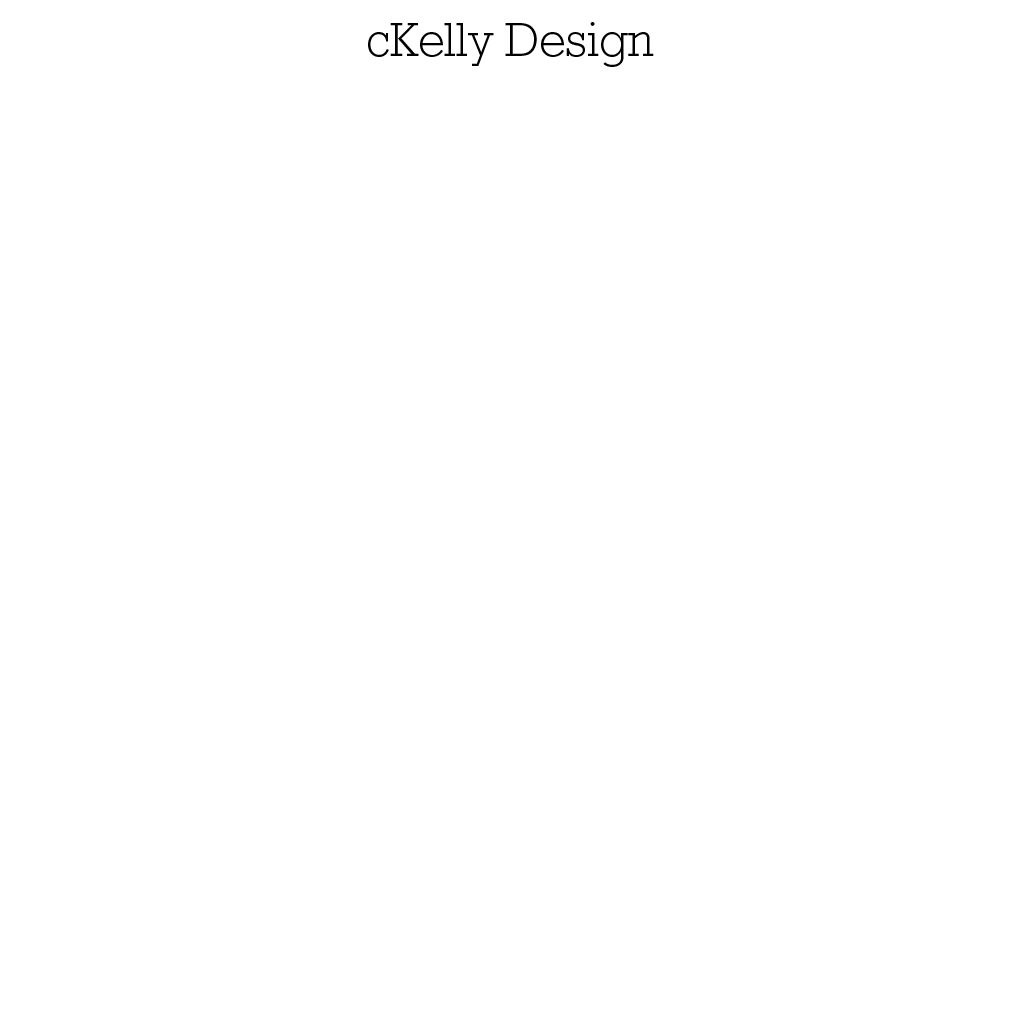
<style>
.page{position:relative;width:1020px;height:1020px;background:#ffffff}
.page>*{position:absolute;margin:0}
.t1{font:48px "RockwellStd-Light";color:#000000}
</style>
<div class="page">
<p class="t1" style="left:368px;top:22px;width:286px;height:45px">cKelly Design</p>
</div>
